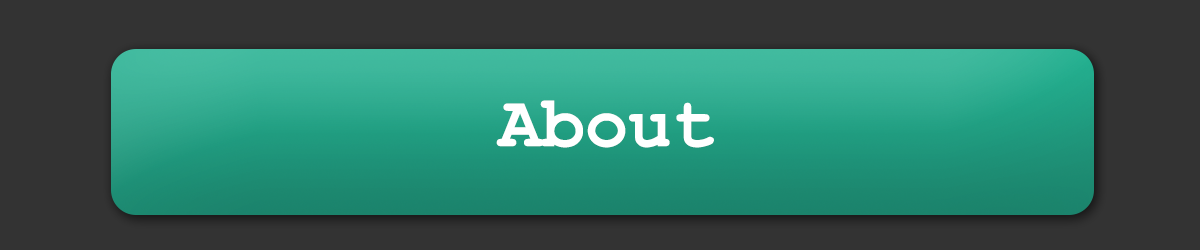
<style>
.page{position:relative;width:1200px;height:250px;background:#333333}
.page>*{position:absolute;margin:0}
.t1{font:72px "CourierNewPS-BoldMT";color:#ffffff}
</style>
<div class="page">
<p class="t1" style="left:496px;top:100px;width:218px;height:48px">About</p>
</div>
